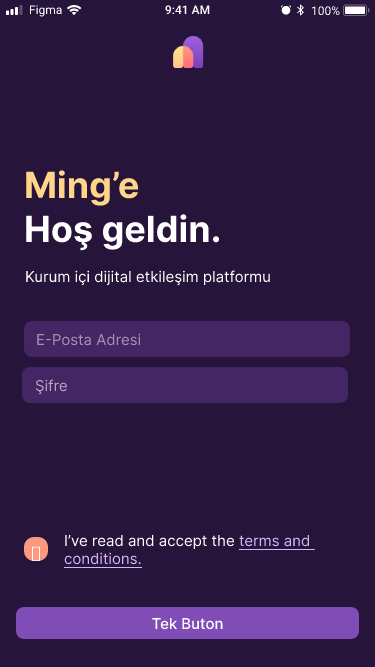
<style>
.page{position:relative;width:375px;height:667px;background:#26143b}
.page>*{position:absolute;margin:0}
.t1{font:12px "SFProText-Regular";color:#ffffff}
.t2{font:12px "SFProText-Semibold";color:#ffffff}
.t3{font:36px "Inter-Bold";color:#ffd58a}
.t4{font:36px "Inter-Bold";color:#ffffff}
.t5{font:15px "Inter-Regular";color:#ffffff}
.t6{font:15px "Inter-Regular";color:#a293b2}
.t7{font:15px "Inter-Regular";color:#b4a8c1}
.t8{font:15px "Inter-Regular";color:#d6b6f6;text-decoration:underline}
.t9{font:15px "Inter-Medium";color:#ffffff}
</style>
<div class="page">
<p class="t1" style="left:29px;top:5px;width:33px;height:12px">Figma</p>
<p class="t2" style="left:165px;top:5px;width:45px;height:10px">9:41 AM</p>
<p class="t1" style="left:311px;top:6px;width:29px;height:10px">100%</p>
<p class="t3" style="left:26px;top:170px;width:112px;height:36px">Ming’e</p>
<p class="t4" style="left:26px;top:214px;width:194px;height:37px">Hoş geldin.</p>
<p class="t5" style="left:26px;top:270px;width:244px;height:16px">Kurum içi dijital etkileşim platformu</p>
<p class="t6" style="left:37px;top:333px;width:104px;height:13px">E-Posta Adresi</p>
<p class="t7" style="left:35px;top:379px;width:32px;height:16px">Şifre</p>
<p class="t5" style="left:64px;top:535px;width:251px;height:34px">I’ve read and accept the <span class="t8">terms and conditions.</span></p>
<p class="t9" style="left:152px;top:618px;width:71px;height:12px">Tek Buton</p>
</div>
